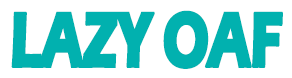
<style>
.page{position:relative;width:292px;height:78px;background:#ffffff}
.page>*{position:absolute;margin:0}
.t1{font:80.8px "ErasITC-Bold";letter-spacing:-0.05em;color:#01b1af;font-weight:bold;scale:0.66 1}
</style>
<div class="page">
<p class="t1" style="left:11px;top:10px;width:272px;height:59px">LAZY OAF</p>
</div>
